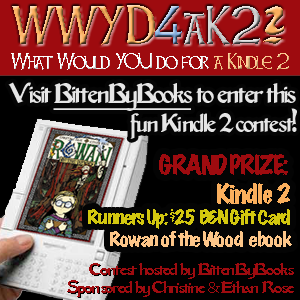
<style>
.page{position:relative;width:300px;height:300px;background:#000000}
.page>*{position:absolute;margin:0}
.t1{font:47.8px "CelticHand";letter-spacing:-0.1em}
.t2{font:47.8px "CelticBold";letter-spacing:-0.1em}
.t3{font:19.9px "CelticHand";letter-spacing:-0.1em;color:#ffffff}
.t4{font:19.9px "CelticHand";letter-spacing:-0.1em;color:#fdc689}
.t5{font:23.9px "MiddleAgesRegularSWFTE";letter-spacing:-0.1em;color:#e6e6e6}
.t6{font:25.9px "MiddleAgesRegularSWFTE";letter-spacing:-0.1em;color:#e6e6e6}
.t7{font:25.9px "MiddleAgesRegularSWFTE";letter-spacing:-0.1em;color:#e6e6e6;text-decoration:underline}
.t8{font:17.9px "MarkerFelt-Wide";letter-spacing:-0.1em;color:#d3c70f;scale:1.07 1}
.t9{font:23.9px "MarkerFelt-Wide";letter-spacing:-0.1em;color:#9e0b0f;scale:1.07 1}
.t10{font:23.9px "MarkerFelt-Wide";letter-spacing:-0.1em;color:#fbaf5d;scale:1.07 1}
.t11{font:17.9px "MarkerFelt-Wide";letter-spacing:-0.1em;color:#fdc689;scale:1.07 1}
.t12{font:15.6px "MiddleAgesRegularSWFTE";letter-spacing:-0.1em;color:#9e0b0f;scale:1.12 1}
.t13{font:15.6px "MinionPro-Regular";letter-spacing:-0.1em;color:#9e0b0f;scale:1.12 1}
</style>
<div class="page">
<p class="t1" style="left:12px;top:5px;width:272px;height:40px">W W Y D 4 a K 2 <span class="t2">?</span></p>
<p class="t3" style="left:11px;top:53px;width:278px;height:17px">What Would YOU do for <span class="t4">a Kindle 2</span></p>
<p class="t5" style="left:8px;top:82px;width:289px;height:57px;text-align:right"><span class="t6">Visit </span><span class="t7">BittenByBooks</span><span class="t6"> to enter this<br></span>fun Ki ndle 2 contest!</p>
<p class="t8" style="left:88px;top:154px;width:204px;height:93px;text-align:right"><span class="t9">GRAND PRIZE: <br></span><span class="t10">Kindle 2<br></span>Runners Up: $25 B&amp;N Gift Card<br><span class="t11">Rowan of the Wood  ebook</span></p>
<p class="t12" style="left:67px;top:263px;width:227px;height:34px;text-align:right">Contest hosted by BittenByBooks<br>Sponsored by Christine <span class="t13">&amp;</span> Ethan Rose</p>
</div>
